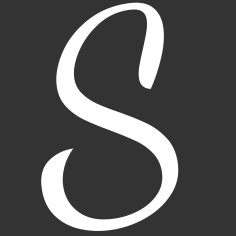
<style>
.page{position:relative;width:236px;height:236px;background:#333333}
.page>*{position:absolute;margin:0}
.t1{font:274.9px "DancingScript-Regular";color:#ffffff;scale:1.07 1}
</style>
<div class="page">
<p class="t1" style="left:41px;top:2px;width:138px;height:229px;rotate:-8deg">S</p>
</div>
